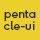
<style>
.page{position:relative;width:40px;height:40px;background:#ebcf2c}
.page>*{position:absolute;margin:0}
.t1{font:12px/12px "F37Ginger-Regular";color:#2c2825}
</style>
<div class="page">
<p class="t1" style="left:4px;top:10px;width:32px;height:20px">penta<br>cle-ui</p>
</div>
